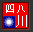
<style>
.page{position:relative;width:33px;height:32px;background:#f20000}
.page>*{position:absolute;margin:0}
.t1{font:10.4px "SimSun";color:#ffffff}
.t2{font:11.7px "SimSun";color:#ffffff}
</style>
<div class="page">
<p class="t1" style="left:6px;top:4px;width:19px;height:9px">四八</p>
<p class="t2" style="left:16px;top:15px;width:11px;height:12px">川</p>
</div>
